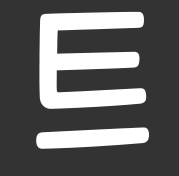
<style>
.page{position:relative;width:179px;height:176px;background:#333333}
.page>*{position:absolute;margin:0}
.t1{font:184.8px "MaplestoryLight";letter-spacing:-0.05em;color:#ffffff;scale:0.91 1}
</style>
<div class="page">
<p class="t1" style="left:36px;top:11px;width:113px;height:138px">트</p>
</div>
